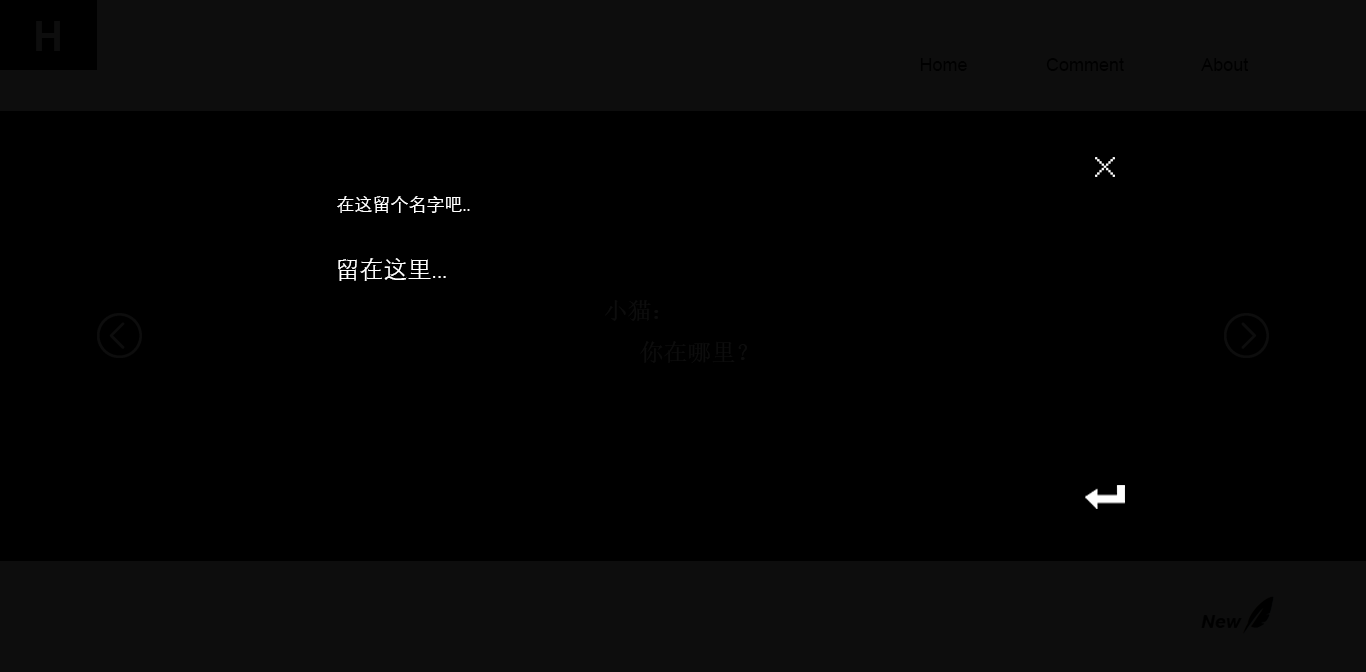
<style>
.page{position:relative;width:1366px;height:672px;background:#000000}
.page>*{position:absolute;margin:0}
.t1{font:42px "Arial-BoldMT";color:#0d0d0d}
.t2{font:18px "ArialMT";color:#000000}
.t3{font:18px "DengXian-Regular";color:#ffffff}
.t4{font:24px "DengXian-Regular";color:#ffffff}
.t5{font:24px "SimSun";color:#0d0d0d}
</style>
<div class="page">
<p class="t1" style="left:36px;top:21px;width:24px;height:30px">H</p>
<p class="t2" style="left:920px;top:58px;width:47px;height:13px">Home</p>
<p class="t2" style="left:1046px;top:58px;width:78px;height:13px">Comment</p>
<p class="t2" style="left:1201px;top:58px;width:48px;height:13px">About</p>
<p class="t3" style="left:337px;top:196px;width:133px;height:17px">在这留个名字吧..</p>
<p class="t4" style="left:338px;top:258px;width:108px;height:23px">留在这里...</p>
<p class="t5" style="left:605px;top:300px;width:142px;height:63px">小猫：<br> 你在哪里？</p>
</div>
